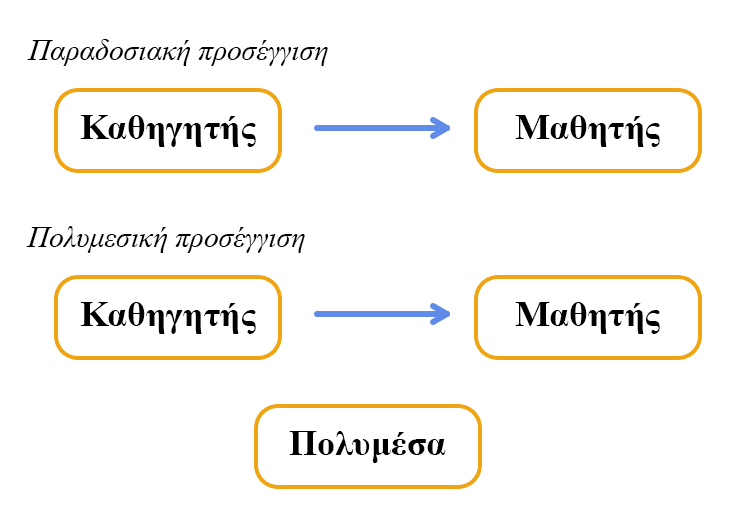
<style>
.page{position:relative;width:735px;height:522px;background:#ffffff}
.page>*{position:absolute;margin:0}
.t1{font:29.5px "TimesNewRomanPS-ItalicMT";color:#000000}
.t2{font:36px "TimesNewRomanPS-BoldMT";color:#000000}
</style>
<div class="page">
<p class="t1" style="left:27px;top:39px;width:301px;height:27px">Παραδοσιακή προσέγγιση</p>
<p class="t2" style="left:80px;top:115px;width:176px;height:32px">Καθηγητής</p>
<p class="t2" style="left:515px;top:115px;width:145px;height:32px">Μαθητής</p>
<p class="t1" style="left:26px;top:226px;width:279px;height:27px">Πολυμεσική προσέγγιση</p>
<p class="t2" style="left:80px;top:302px;width:176px;height:32px">Καθηγητής</p>
<p class="t2" style="left:515px;top:302px;width:145px;height:32px">Μαθητής</p>
<p class="t2" style="left:289px;top:431px;width:157px;height:32px">Πολυμέσα</p>
</div>
